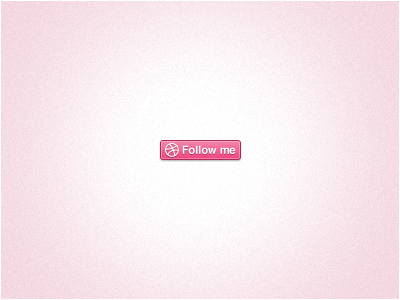
<style>
.page{position:relative;width:400px;height:300px}
.page>*{position:absolute;margin:0}
.t1{font:11px "Helvetica-Bold";color:#ffffff}
</style>
<div class="page">
<p class="t1" style="left:182px;top:145px;width:54px;height:9px">Follow me</p>
</div>
